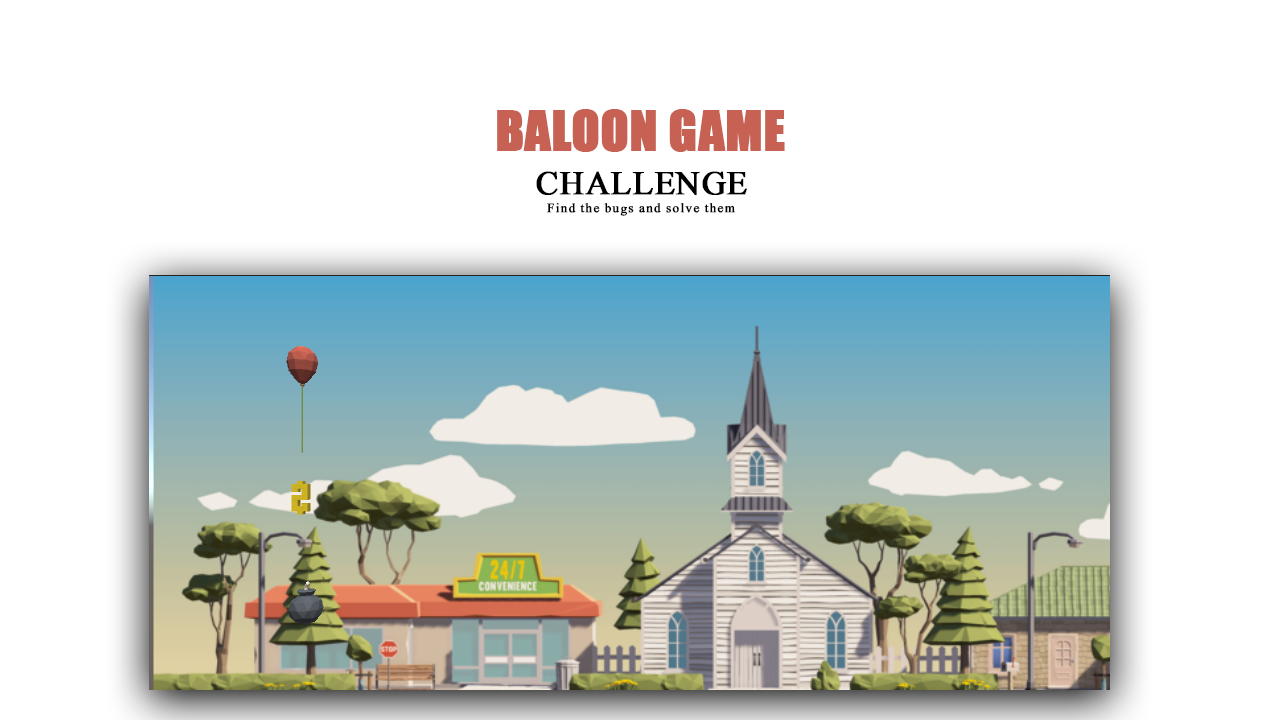
<style>
.page{position:relative;width:1280px;height:720px;background:#ffffff}
.page>*{position:absolute;margin:0}
.t1{font:50.7px "Impact";color:#c66153;text-transform:uppercase;font-weight:bold}
.t2{font:40.7px "Jameel-Noori-Nastaleeq-Kasheeda";color:#000000;text-transform:uppercase;font-weight:bold}
.t3{font:15.7px "Jameel-Noori-Nastaleeq-Kasheeda";letter-spacing:0.06em;color:#000000;font-weight:bold}
</style>
<div class="page">
<p class="t1" style="left:497px;top:109px;width:288px;height:43px">baloon game</p>
<p class="t2" style="left:536px;top:171px;width:211px;height:24px">challenge</p>
<p class="t3" style="left:547px;top:203px;width:188px;height:13px">Find the bugs and solve them</p>
</div>
